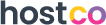
<style>
.page{position:relative;width:106px;height:25px;background:#ffffff}
.page>*{position:absolute;margin:0}
.t1{font:32px "Poppins-SemiBold";letter-spacing:-0.025em;color:#35404e}
.t2{font:32px "Poppins-SemiBold";letter-spacing:-0.025em}
</style>
<div class="page">
<p class="t1" style="left:0px;top:0px;width:67px;height:25px">host</p>
<p class="t2" style="left:69px;top:6px;width:37px;height:19px">co</p>
</div>
